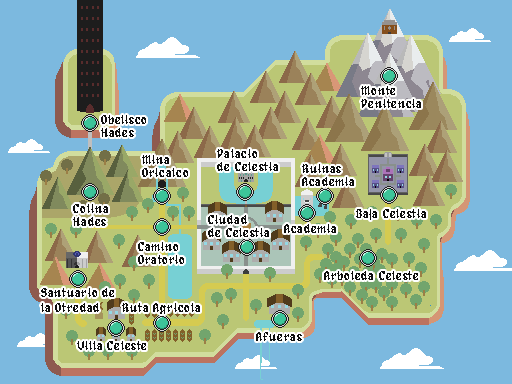
<style>
.page{position:relative;width:512px;height:384px;background:#7cb9df}
.page>*{position:absolute;margin:0}
.t1{font:12.5px "Alagard";color:#0d0d0d}
</style>
<div class="page">
<p class="t1" style="left:361px;top:86px;width:60px;height:22px">Monte<br>Penitencia</p>
<p class="t1" style="left:101px;top:115px;width:45px;height:22px">Obelisco<br>Hades</p>
<p class="t1" style="left:217px;top:149px;width:61px;height:22px">Palacio <br>de Celestia</p>
<p class="t1" style="left:142px;top:155px;width:46px;height:22px">Mina<br>Oricalco</p>
<p class="t1" style="left:302px;top:164px;width:52px;height:22px">Ruinas<br>Academia</p>
<p class="t1" style="left:73px;top:204px;width:35px;height:22px">Colina <br>Hades</p>
<p class="t1" style="left:356px;top:209px;width:70px;height:11px">Baja Celestia</p>
<p class="t1" style="left:208px;top:215px;width:61px;height:22px">Ciudad <br>de Celestia</p>
<p class="t1" style="left:284px;top:224px;width:52px;height:9px">Academia</p>
<p class="t1" style="left:138px;top:242px;width:46px;height:22px">Camino <br>Oratorio</p>
<p class="t1" style="left:324px;top:271px;width:94px;height:9px">Arboleda Celeste</p>
<p class="t1" style="left:41px;top:288px;width:73px;height:24px">Santuario de<br>la Otredad</p>
<p class="t1" style="left:122px;top:303px;width:78px;height:11px">Ruta Agricola</p>
<p class="t1" style="left:77px;top:341px;width:69px;height:9px">Villa Celeste</p>
<p class="t1" style="left:256px;top:332px;width:46px;height:9px">Afueras</p>
</div>
